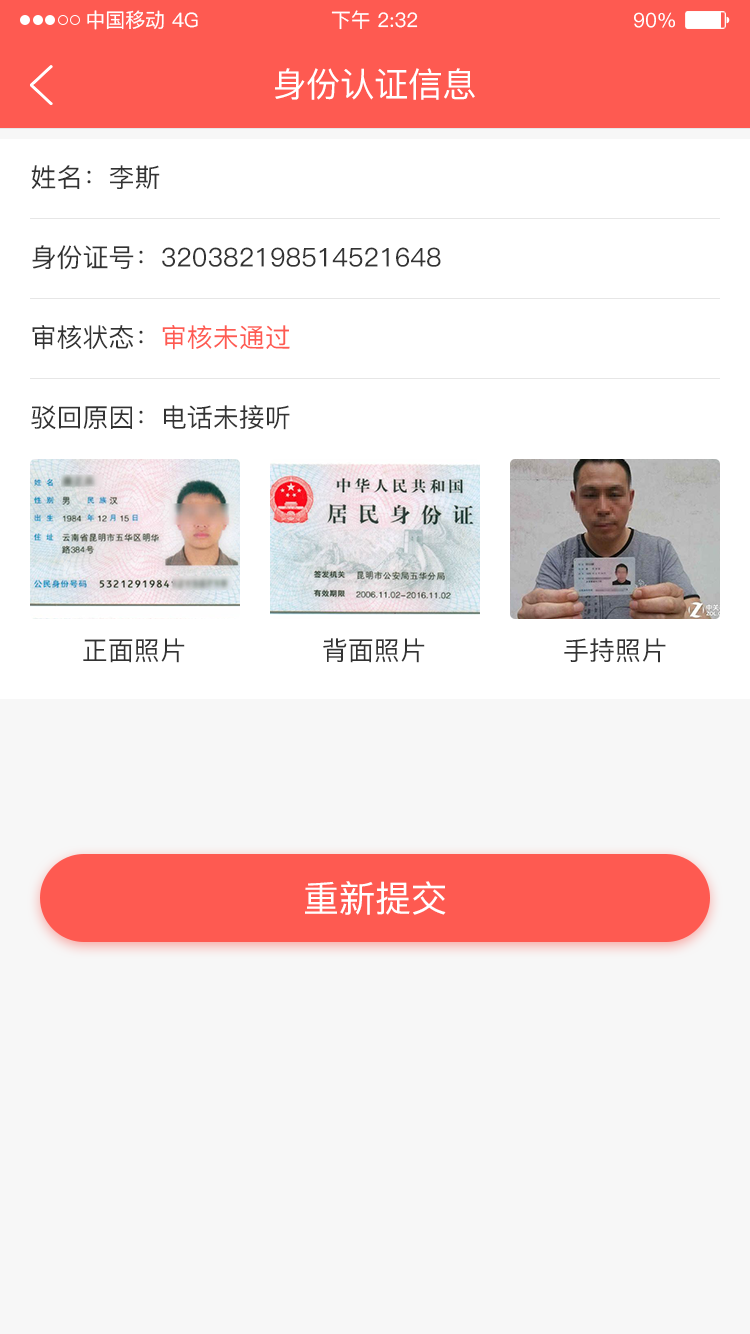
<style>
.page{position:relative;width:750px;height:1334px;background:#f7f7f7}
.page>*{position:absolute;margin:0}
.t1{font:20px "PingFang-SC-Medium";color:#ffffff}
.t2{font:34px "PingFang-SC-Medium";color:#ffffff}
.t3{font:26px "PingFang-SC-Medium";color:#333333}
.t4{font:26px "PingFang-SC-Medium";color:#fe5a51}
.t5{font:36px "PingFang-SC-Medium";color:#ffffff}
</style>
<div class="page">
<p class="t1" style="left:87px;top:10px;width:77px;height:20px">中国移动</p>
<p class="t1" style="left:172px;top:12px;width:26px;height:16px">4G</p>
<p class="t1" style="left:331px;top:10px;width:87px;height:20px">下午 2:32</p>
<p class="t1" style="left:634px;top:12px;width:41px;height:16px">90%</p>
<p class="t2" style="left:275px;top:68px;width:200px;height:32px">身份认证信息</p>
<p class="t3" style="left:31px;top:165px;width:129px;height:24px">姓名：李斯</p>
<p class="t3" style="left:32px;top:245px;width:409px;height:25px">身份证号：320382198514521648</p>
<p class="t3" style="left:32px;top:325px;width:258px;height:25px">审核状态：<span class="t4">审核未通过</span></p>
<p class="t3" style="left:31px;top:405px;width:259px;height:25px">驳回原因：电话未接听</p>
<p class="t3" style="left:83px;top:638px;width:102px;height:25px">正面照片</p>
<p class="t3" style="left:323px;top:638px;width:102px;height:25px">背面照片</p>
<p class="t3" style="left:564px;top:638px;width:102px;height:25px">手持照片</p>
<p class="t5" style="left:305px;top:881px;width:141px;height:34px">重新提交</p>
</div>
